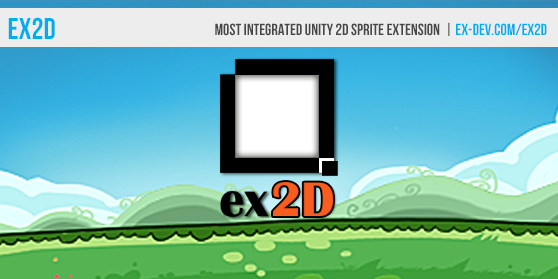
<style>
.page{position:relative;width:558px;height:279px}
.page>*{position:absolute;margin:0}
.t1{font:30px "BebasNeue";color:#00aeef}
.t2{font:16px "BebasNeue";color:#474747}
.t3{font:16px "BebasNeue";color:#00aeef}
.t4{font:50.3px "BritannicBold";color:#f85c1e}
.t5{font:50.3px "BritannicBold";color:#000000}
</style>
<div class="page">
<p class="t1" style="left:8px;top:17px;width:47px;height:22px">ex2D</p>
<p class="t2" style="left:215px;top:22px;width:332px;height:14px">most integrated unity 2d sprite extension  | <span class="t3">ex-dev.com/ex2d</span></p>
<p class="t4" style="left:273px;top:182px;width:60px;height:34px">2D</p>
<p class="t5" style="left:220px;top:191px;width:49px;height:26px">ex</p>
</div>
